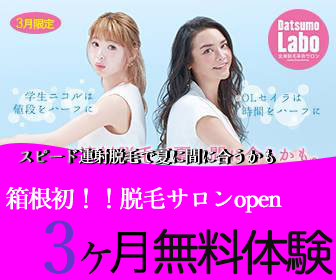
<style>
.page{position:relative;width:336px;height:280px;background:#ff00ff}
.page>*{position:absolute;margin:0}
.t1{font:16px "YuMin_36pKn-Medium";letter-spacing:-0.075em;color:#ffffff;font-weight:bold}
.t2{font:16px "YuMin_36pKn-Medium";letter-spacing:-0.075em;font-weight:bold}
.t3{font:24px "YuMin_36pKn-Medium";letter-spacing:-0.075em;color:#ffffff;font-weight:bold}
.t4{font:72px "YuMin_36pKn-Medium";letter-spacing:-0.075em;color:#6633cc;font-weight:bold}
.t5{font:48px "HiraKakuPro-W3";letter-spacing:-0.1em;color:#000000;font-weight:bold}
.t6{font:48px "HiraMaruProN-W4";letter-spacing:-0.1em;color:#10110e;font-weight:bold}
.t7{font:48px "HiraMinPro-W3";letter-spacing:-0.1em;color:#10110e;font-weight:bold}
</style>
<div class="page">
<p class="t1" style="left:18px;top:148px;width:255px;height:16px">スピード連射脱毛で夏に間に合うかも</p>
<p class="t2" style="left:19px;top:149px;width:255px;height:16px">スピード連射脱毛で夏に間に合うかも</p>
<p class="t2" style="left:20px;top:148px;width:255px;height:16px">スピード連射脱毛で夏に間に合うかも</p>
<p class="t2" style="left:21px;top:148px;width:255px;height:16px">スピード連射脱毛で夏に間に合うかも</p>
<p class="t3" style="left:6px;top:187px;width:276px;height:26px">箱根初！！脱毛サロンopen</p>
<p class="t4" style="left:44px;top:220px;width:31px;height:54px">3</p>
<p class="t5" style="left:110px;top:231px;width:37px;height:43px">月</p>
<p class="t6" style="left:153px;top:228px;width:90px;height:47px">無料</p>
<p class="t6" style="left:241px;top:229px;width:92px;height:46px">体験</p>
<p class="t7" style="left:80px;top:242px;width:31px;height:33px">ヶ</p>
</div>
